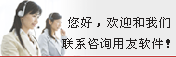
<style>
.page{position:relative;width:176px;height:58px;background:#ececec}
.page>*{position:absolute;margin:0}
.t1{font:12px "NSimSun";color:#221f1f}
</style>
<div class="page">
<p class="t1" style="left:62px;top:17px;width:108px;height:32px">您好，欢迎和我们<br>联系咨询用友软件！</p>
</div>
